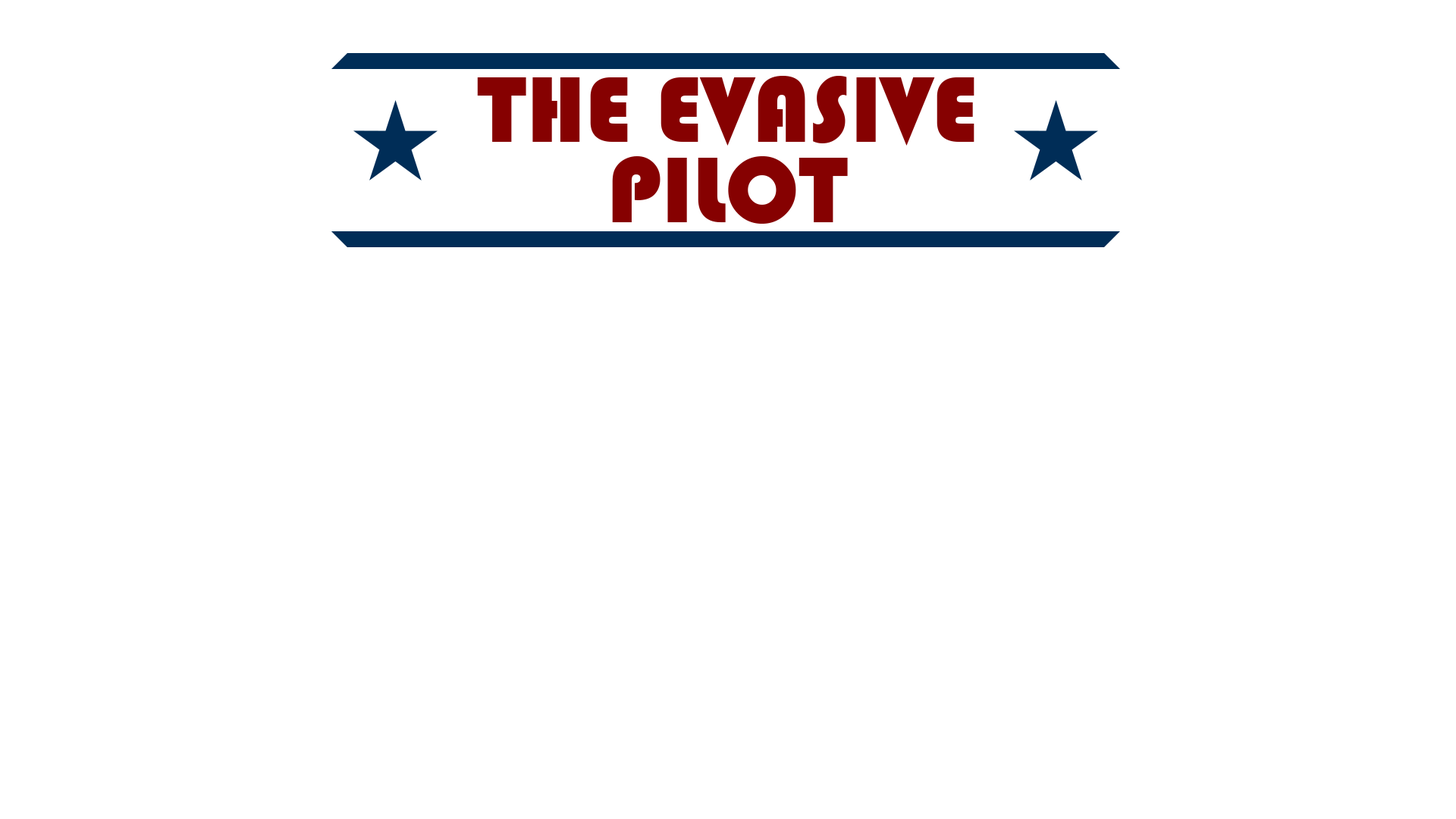
<style>
.page{position:relative;width:1456px;height:819px;background:#ffffff}
.page>*{position:absolute;margin:0}
.t1{font:96.3px/80.3px "Bauhaus93";color:#860101}
</style>
<div class="page">
<p class="t1" style="left:477px;top:76px;width:497px;height:148px;text-align:center">THE EVASIVE<br>PILOT</p>
</div>
